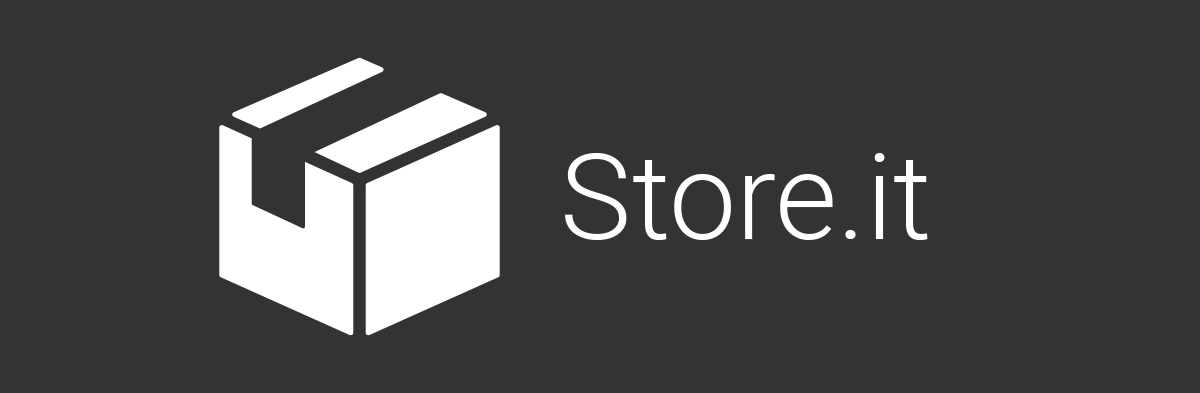
<style>
.page{position:relative;width:1200px;height:393px;background:#333333}
.page>*{position:absolute;margin:0}
.t1{font:120px "Roboto-Light";color:#ffffff}
</style>
<div class="page">
<p class="t1" style="left:565px;top:153px;width:363px;height:87px">Store.it</p>
</div>
